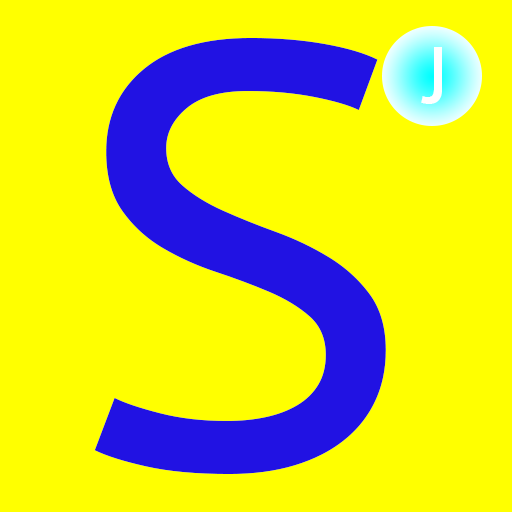
<style>
.page{position:relative;width:512px;height:512px;background:#ffff00}
.page>*{position:absolute;margin:0}
.t1{font:600px "PTSans-Caption";color:#2112e3}
.t2{font:80px "PTSans-Caption";color:#ffffff}
</style>
<div class="page">
<p class="t1" style="left:94px;top:38px;width:292px;height:436px">S</p>
<p class="t2" style="left:421px;top:47px;width:21px;height:57px">J</p>
</div>
